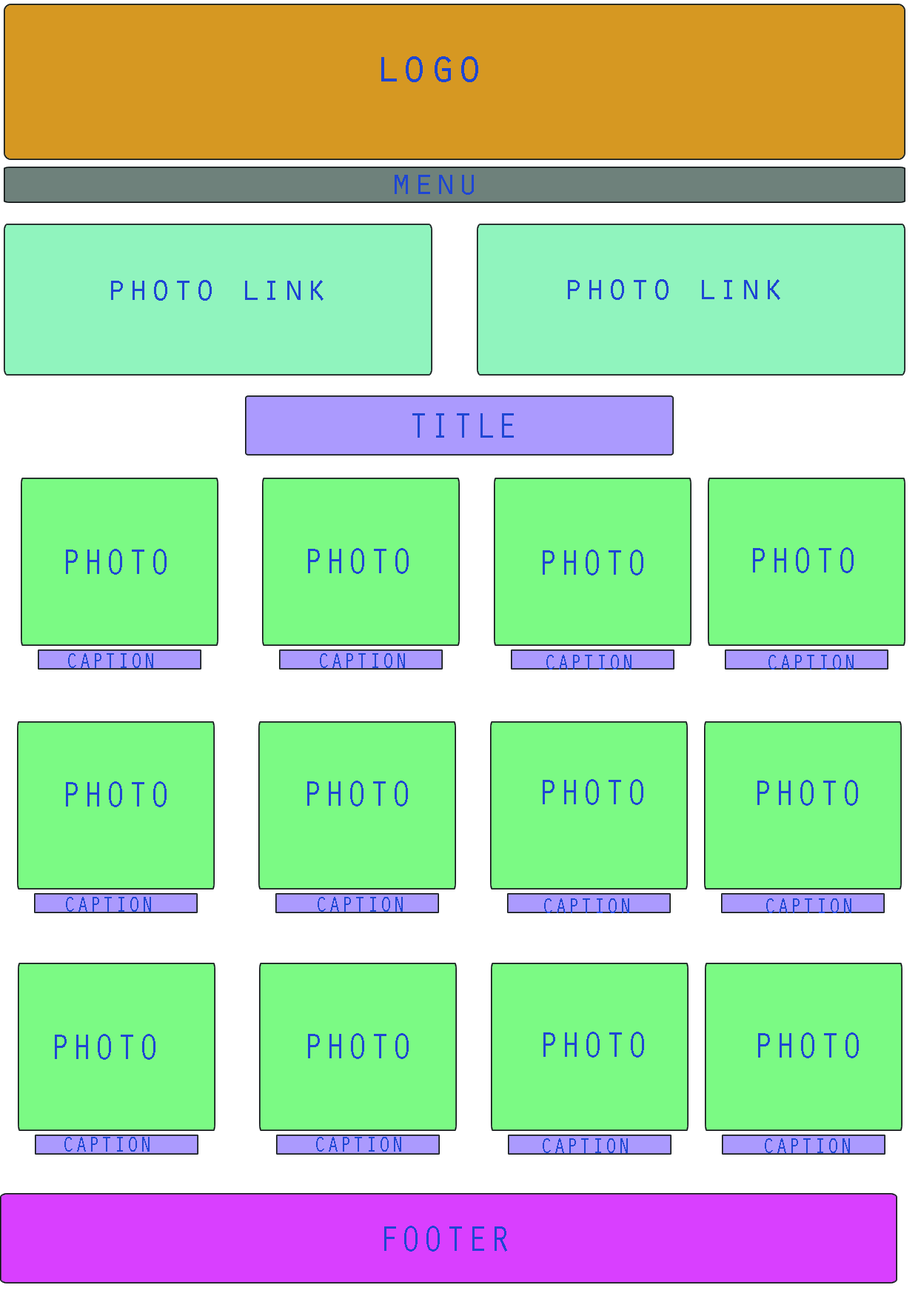
<style>
.page{position:relative;width:918px;height:1299px;background:#7bfa84}
.page>*{position:absolute;margin:0}
.t1{font:46.3px "OratorStd";color:#1e47d3}
.t2{font:37px "OratorStd";color:#1e47d3}
.t3{font:21.6px "OratorStd";color:#1e47d3}
</style>
<div class="page">
<p class="t1" style="left:381px;top:56px;width:97px;height:26px">logo</p>
<p class="t2" style="left:395px;top:175px;width:79px;height:20px">menu</p>
<p class="t2" style="left:111px;top:280px;width:213px;height:21px">photo link</p>
<p class="t2" style="left:568px;top:279px;width:212px;height:21px">photo link</p>
<p class="t2" style="left:412px;top:413px;width:102px;height:25px">TITLE</p>
<p class="t2" style="left:66px;top:549px;width:101px;height:26px">PHOTO</p>
<p class="t2" style="left:308px;top:548px;width:101px;height:26px">PHOTO</p>
<p class="t2" style="left:543px;top:549px;width:100px;height:26px">PHOTO</p>
<p class="t2" style="left:753px;top:547px;width:101px;height:26px">PHOTO</p>
<p class="t3" style="left:68px;top:653px;width:85px;height:15px">CAPTION</p>
<p class="t3" style="left:320px;top:653px;width:85px;height:15px">CAPTION</p>
<p class="t3" style="left:546px;top:655px;width:86px;height:14px">CAPTION</p>
<p class="t3" style="left:769px;top:655px;width:85px;height:14px">CAPTION</p>
<p class="t2" style="left:66px;top:781px;width:101px;height:26px">PHOTO</p>
<p class="t2" style="left:307px;top:780px;width:101px;height:26px">PHOTO</p>
<p class="t2" style="left:543px;top:779px;width:100px;height:26px">PHOTO</p>
<p class="t2" style="left:757px;top:780px;width:101px;height:26px">PHOTO</p>
<p class="t3" style="left:66px;top:897px;width:85px;height:14px">CAPTION</p>
<p class="t3" style="left:318px;top:897px;width:85px;height:14px">CAPTION</p>
<p class="t3" style="left:544px;top:898px;width:85px;height:15px">CAPTION</p>
<p class="t3" style="left:766px;top:898px;width:86px;height:15px">CAPTION</p>
<p class="t2" style="left:55px;top:1034px;width:100px;height:26px">PHOTO</p>
<p class="t2" style="left:308px;top:1033px;width:101px;height:26px">PHOTO</p>
<p class="t2" style="left:543px;top:1031px;width:101px;height:26px">PHOTO</p>
<p class="t2" style="left:758px;top:1032px;width:101px;height:26px">PHOTO</p>
<p class="t3" style="left:64px;top:1137px;width:86px;height:14px">CAPTION</p>
<p class="t3" style="left:316px;top:1137px;width:85px;height:14px">CAPTION</p>
<p class="t3" style="left:543px;top:1138px;width:85px;height:15px">CAPTION</p>
<p class="t3" style="left:765px;top:1138px;width:85px;height:15px">CAPTION</p>
<p class="t2" style="left:384px;top:1225px;width:123px;height:26px">FOOTER</p>
</div>
